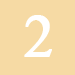
<style>
.page{position:relative;width:75px;height:75px;background:#f6daa4}
.page>*{position:absolute;margin:0}
.t1{font:60px "TimesNewRomanPSMT";color:#ffffff;font-weight:bold}
</style>
<div class="page">
<p class="t1" style="left:24px;top:15px;width:28px;height:42px">2</p>
</div>
